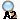
<style>
.page{position:relative;width:20px;height:20px;background:#fcfaf9}
.page>*{position:absolute;margin:0}
.t1{font:11px "BellGothicStd-Bold";letter-spacing:-0.1em;color:#000000;font-weight:bold}
</style>
<div class="page">
<p class="t1" style="left:3px;top:11px;width:14px;height:8px">A2</p>
</div>
